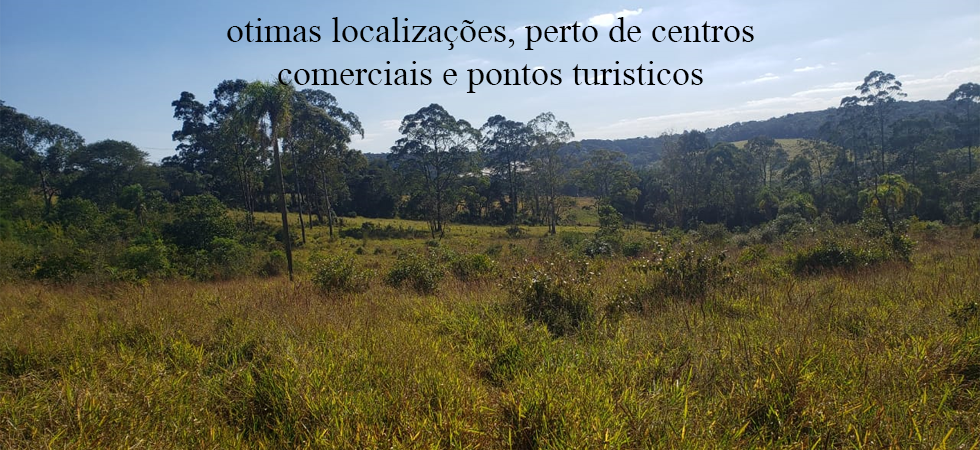
<style>
.page{position:relative;width:980px;height:450px}
.page>*{position:absolute;margin:0}
.t1{font:36px "MongolianBaiti";color:#000000}
</style>
<div class="page">
<p class="t1" style="left:227px;top:17px;width:527px;height:76px;text-align:center">otimas localizações, perto de centros comerciais e pontos turisticos</p>
</div>
